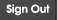
<style>
.page{position:relative;width:57px;height:20px;background:#494949}
.page>*{position:absolute;margin:0}
.t1{font:10.7px "TeXGyreAdventor-Bold";color:#fbfcfc}
</style>
<div class="page">
<p class="t1" style="left:6px;top:4px;width:44px;height:12px">Sign Out</p>
</div>
